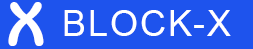
<style>
.page{position:relative;width:253px;height:49px;background:#1e53ed}
.page>*{position:absolute;margin:0}
.t1{font:63px "464-CAI978";letter-spacing:0.05em;color:#ffffff}
.t2{font:36px "ArialMT";letter-spacing:0.05em;color:#ffffff}
</style>
<div class="page">
<p class="t1" style="left:8px;top:2px;width:36px;height:44px">X</p>
<p class="t2" style="left:64px;top:10px;width:167px;height:26px">BLOCK-X</p>
</div>
